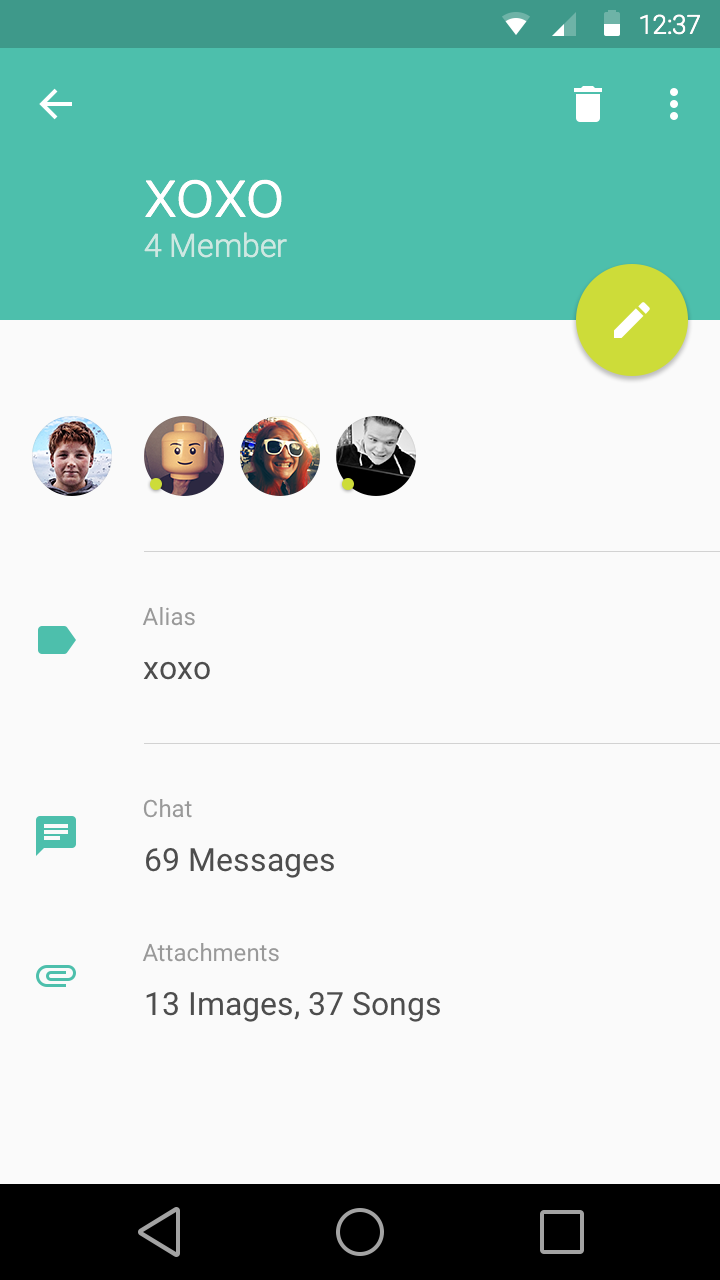
<style>
.page{position:relative;width:720px;height:1280px;background:#fafafa}
.page>*{position:absolute;margin:0}
.t1{font:26.1px "Roboto-Light";color:#ffffff}
.t2{font:68px "Roboto-Light";color:#ffffff}
.t3{font:32px "Roboto-Light";color:#cde8e2}
.t4{font:24px "Roboto-Regular";color:#999999}
.t5{font:32px "Roboto-Regular";color:#4d4d4d}
</style>
<div class="page">
<p class="t1" style="left:640px;top:14px;width:60px;height:21px">12:37</p>
<p class="t2" style="left:145px;top:179px;width:137px;height:39px">xoxo</p>
<p class="t3" style="left:144px;top:232px;width:143px;height:26px">4 Member</p>
<p class="t4" style="left:142px;top:607px;width:53px;height:19px">Alias</p>
<p class="t5" style="left:143px;top:661px;width:67px;height:19px">xoxo</p>
<p class="t4" style="left:143px;top:799px;width:49px;height:19px">Chat</p>
<p class="t5" style="left:146px;top:848px;width:188px;height:30px">69 Messages</p>
<p class="t4" style="left:142px;top:943px;width:137px;height:19px">Attachments</p>
<p class="t5" style="left:146px;top:992px;width:294px;height:30px">13 Images, 37 Songs</p>
</div>
